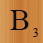
<style>
.page{position:relative;width:43px;height:43px}
.page>*{position:absolute;margin:0}
.t1{font:30px "TimesNewRomanPSMT";color:#0c0c0b}
.t2{font:12px "TimesNewRomanPSMT";color:#0c0c0b}
</style>
<div class="page">
<p class="t1" style="left:10px;top:10px;width:19px;height:20px">B</p>
<p class="t2" style="left:33px;top:28px;width:5px;height:9px">3</p>
</div>
